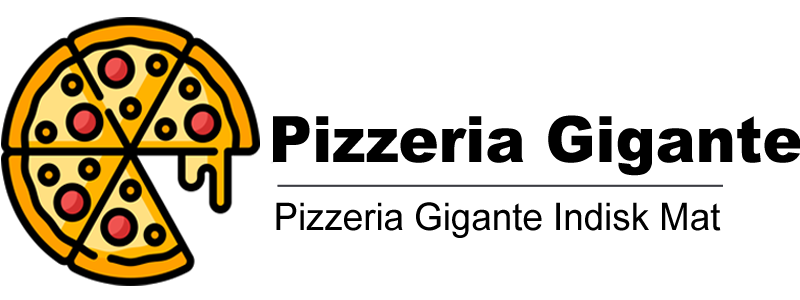
<style>
.page{position:relative;width:800px;height:300px;background:#ffffff}
.page>*{position:absolute;margin:0}
.t1{font:63.6px "Arial-Black";color:#000000;scale:0.94 1}
.t2{font:37.9px "ArialMT";color:#000000;scale:0.97 1}
</style>
<div class="page">
<p class="t1" style="left:273px;top:115px;width:528px;height:61px">Pizzeria Gigante</p>
<p class="t2" style="left:276px;top:202px;width:445px;height:36px">Pizzeria Gigante Indisk Mat</p>
</div>
